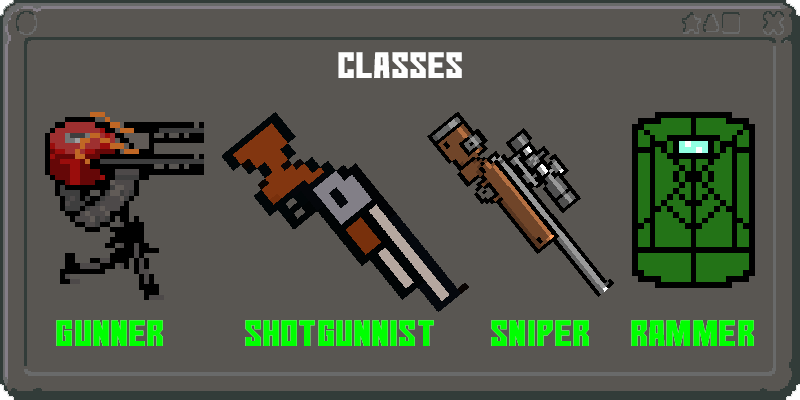
<style>
.page{position:relative;width:800px;height:400px;background:#595652}
.page>*{position:absolute;margin:0}
.t1{font:36px "No-Continue";color:#fefefe}
.t2{font:36px "No-Continue";color:#00ff00}
</style>
<div class="page">
<p class="t1" style="left:338px;top:52px;width:124px;height:26px">classes</p>
<p class="t2" style="left:56px;top:320px;width:698px;height:26px">Gunner          Shotgunnist       sniper     rammer</p>
</div>
